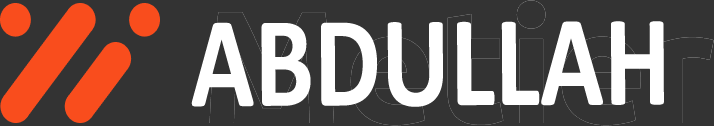
<style>
.page{position:relative;width:714px;height:126px;background:#333333}
.page>*{position:absolute;margin:0}
.t1{font:130.9px "Calibri-Bold";color:#ffffff;scale:0.81 1}
</style>
<div class="page">
<p class="t1" style="left:191px;top:21px;width:473px;height:86px">ABDULLAH</p>
</div>
